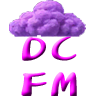
<style>
.page{position:relative;width:96px;height:96px;background:#ffffff}
.page>*{position:absolute;margin:0}
.t1{font:29.9px "DarkCloud_Speech-Regular";scale:1.68 1}
</style>
<div class="page">
<p class="t1" style="left:21px;top:36px;width:56px;height:61px;text-align:center">DC<br>FM</p>
</div>
